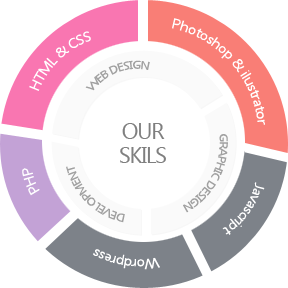
<style>
.page{position:relative;width:288px;height:288px;background:#ffffff}
.page>*{position:absolute;margin:0}
.t1{font:11px "LaoUI";letter-spacing:-0.05em;color:#a1a1a1;text-transform:uppercase}
.t2{font:22px/24px "LaoUI";letter-spacing:-0.05em;color:#7f7f7f;text-transform:uppercase}
.t3{font:14px "LaoUI";letter-spacing:-0.05em;color:#ffffff}
.t4{font:11px "LaoUI";letter-spacing:-0.05em;color:#a1a0a0;text-transform:uppercase}
</style>
<div class="page">
<p class="t1" style="left:85px;top:60px;width:65px;height:31px;rotate:-21deg">Web design</p>
<p class="t2" style="left:120px;top:123px;width:46px;height:40px;text-align:center">our<br>Skils</p>
<p class="t1" style="left:183px;top:134px;width:45px;height:79px;rotate:117deg">graphic design</p>
<p class="t3" style="left:22px;top:168px;width:18px;height:28px;rotate:-110deg">PHP</p>
<p class="t4" style="left:66px;top:166px;width:59px;height:57px;rotate:-137deg">development</p>
<p class="t3" style="left:222px;top:182px;width:43px;height:53px;rotate:125deg">Javascript</p>
<p class="t3" style="left:93px;top:249px;width:67px;height:21px;rotate:-172deg">Wordpress</p>
</div>
